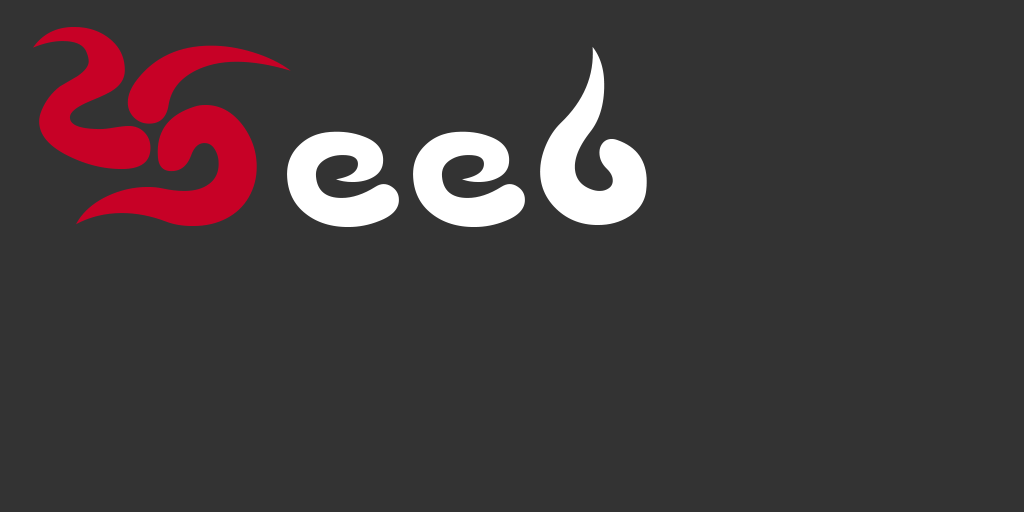
<style>
.page{position:relative;width:1024px;height:512px;background:#333333}
.page>*{position:absolute;margin:0}
.t1{font:262.3px "Beech";letter-spacing:-0.01em;color:#c70126}
.t2{font:262.3px "Beech";letter-spacing:-0.01em;color:#ffffff}
</style>
<div class="page">
<p class="t1" style="left:33px;top:27px;width:258px;height:199px">W</p>
<p class="t2" style="left:287px;top:47px;width:360px;height:180px">eeb</p>
</div>
